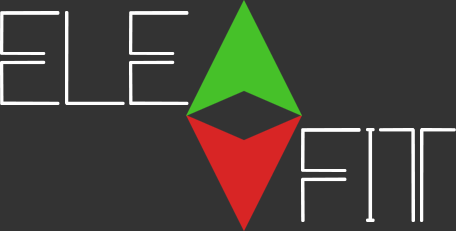
<style>
.page{position:relative;width:456px;height:231px;background:#333333}
.page>*{position:absolute;margin:0}
.t1{font:200px "Carrinady";letter-spacing:-0.075em;color:#fefefe}
</style>
<div class="page">
<p class="t1" style="left:0px;top:11px;width:189px;height:94px">ELE</p>
<p class="t1" style="left:301px;top:128px;width:155px;height:94px">FIT</p>
</div>
